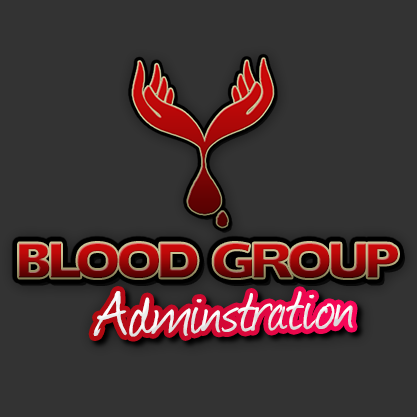
<style>
.page{position:relative;width:417px;height:417px;background:#333333}
.page>*{position:absolute;margin:0}
.t1{font:48.1px "DoradoHeadline";letter-spacing:-0.05em;text-transform:uppercase;scale:0.89 1}
.t2{font:75.6px "Journal";color:#ffffff}
</style>
<div class="page">
<p class="t1" style="left:19px;top:243px;width:379px;height:35px">BLOOD GROUP</p>
<p class="t2" style="left:93px;top:291px;width:260px;height:46px;rotate:-2deg">Adminstration</p>
</div>
